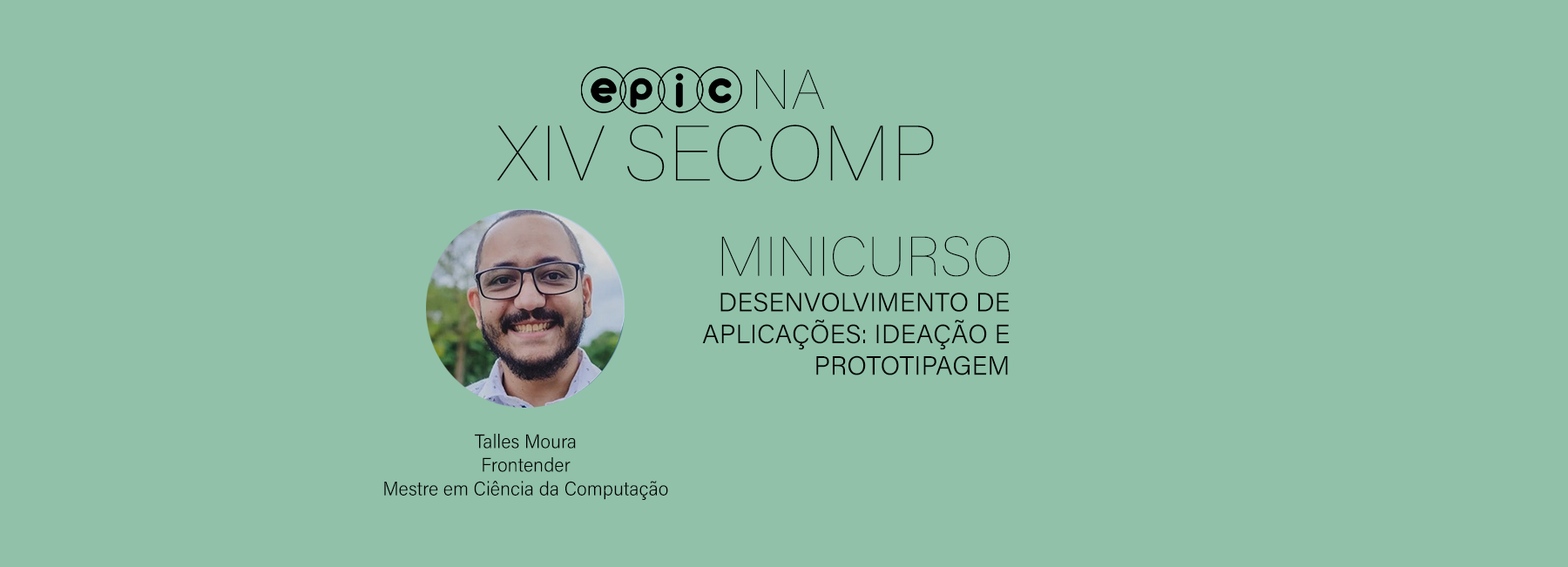
<style>
.page{position:relative;width:1568px;height:567px;background:#91c1a9}
.page>*{position:absolute;margin:0}
.t1{font:55.8px "AcuminConcept-Thin";color:#000000}
.t2{font:78px "AcuminConcept-Thin";color:#000000}
.t3{font:26.4px "AcuminConcept-Light";color:#000000}
.t4{font:19.7px "AcuminConcept_289.000wght_93.000wdth";color:#000000}
</style>
<div class="page">
<p class="t1" style="left:756px;top:70px;width:69px;height:39px">NA</p>
<p class="t2" style="left:497px;top:125px;width:437px;height:57px">XIV SECOMP</p>
<p class="t1" style="left:721px;top:236px;width:289px;height:41px">MINICURSO</p>
<p class="t3" style="left:702px;top:293px;width:308px;height:82px;text-align:right">DESENVOLVIMENTO DE<br>APLICAÇÕES: IDEAÇÃO E<br>PROTOTIPAGEM</p>
<p class="t4" style="left:384px;top:434px;width:284px;height:66px;text-align:center">Talles Moura<br>Frontender<br>Mestre em Ciência da Computação</p>
</div>
